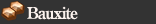
<style>
.page{position:relative;width:156px;height:24px;background:#333333}
.page>*{position:absolute;margin:0}
.t1{font:16px "RyuminPro-ExBold";letter-spacing:-0.08em;color:#fcf3ee}
</style>
<div class="page">
<p class="t1" style="left:27px;top:6px;width:51px;height:14px">Bauxite</p>
</div>
